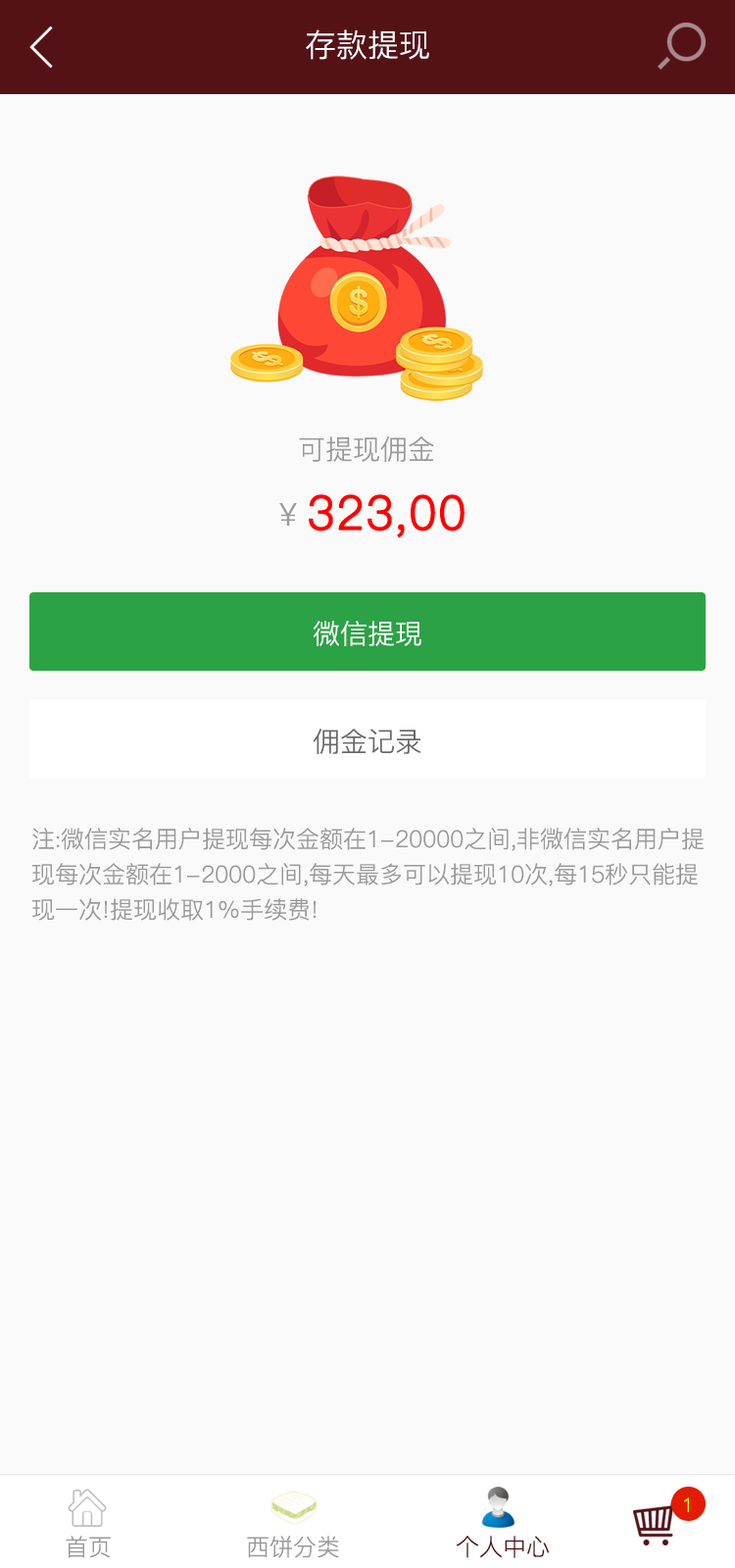
<style>
.page{position:relative;width:735px;height:1568px;background:#fafafa}
.page>*{position:absolute;margin:0}
.t1{font:31.4px "PingFang-SC-Regular";color:#ffffff}
.t2{font:27.5px "PingFang-SC-Regular";color:#999999}
.t3{font:47.1px "PingFang-SC-Regular";color:#ff0000;font-weight:bold}
.t4{font:31.4px "PingFang-SC-Regular";color:#999999}
.t5{font:27.5px "PingFang-SC-Regular";color:#ffffff}
.t6{font:27.5px "PingFang-SC-Regular";color:#666666}
.t7{font:23.5px/35.3px "PingFang-SC-Regular";color:#999999}
.t8{font:19.6px "PingFang-SC-Regular";color:#ffff00}
.t9{font:23.5px "PingFang-SC-Regular";color:#999999}
.t10{font:23.5px "PingFang-SC-Regular";color:#541217}
</style>
<div class="page">
<p class="t1" style="left:306px;top:29px;width:124px;height:31px">存款提现</p>
<p class="t2" style="left:299px;top:436px;width:135px;height:26px">可提现佣金</p>
<p class="t3" style="left:309px;top:494px;width:156px;height:44px">323,00</p>
<p class="t4" style="left:279px;top:503px;width:18px;height:23px">￥</p>
<p class="t5" style="left:314px;top:620px;width:108px;height:26px">微信提現</p>
<p class="t6" style="left:314px;top:729px;width:108px;height:25px">佣金记录</p>
<p class="t7" style="left:32px;top:828px;width:672px;height:93px">注:微信实名用户提现每次金额在1-20000之间,非微信实名用户提现每次金额在1-2000之间,每天最多可以提现10次,每15秒只能提现一次!提现收取1%手续费!</p>
<p class="t8" style="left:684px;top:1497px;width:5px;height:15px">1</p>
<p class="t9" style="left:66px;top:1536px;width:45px;height:22px">首页</p>
<p class="t9" style="left:247px;top:1536px;width:92px;height:22px">西饼分类</p>
<p class="t10" style="left:456px;top:1536px;width:94px;height:22px">个人中心</p>
</div>
